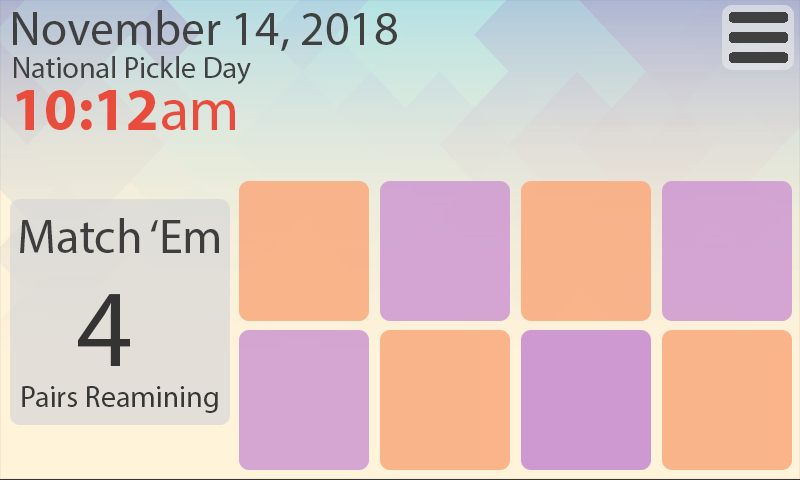
<style>
.page{position:relative;width:800px;height:480px}
.page>*{position:absolute;margin:0}
.t1{font:48px "MyriadPro-Regular";color:#404040}
.t2{font:30px "MyriadPro-Regular";color:#404040}
.t3{font:60px "MyriadPro-Bold";color:#e74c3c}
.t4{font:60px "MyriadPro-Regular";color:#e74c3c}
.t5{font:48px "MyriadPro-Regular";color:#3e3e3e}
.t6{font:110px "MyriadPro-Regular";color:#343434}
.t7{font:30px "MyriadPro-Regular";color:#363636}
</style>
<div class="page">
<p class="t1" style="left:13px;top:10px;width:384px;height:41px">November 14, 2018</p>
<p class="t2" style="left:14px;top:56px;width:237px;height:29px">National Pickle Day</p>
<p class="t3" style="left:16px;top:90px;width:219px;height:40px">10:12<span class="t4">am</span></p>
<p class="t5" style="left:20px;top:218px;width:199px;height:35px">Match ‘Em</p>
<p class="t6" style="left:78px;top:294px;width:52px;height:72px">4</p>
<p class="t7" style="left:22px;top:386px;width:196px;height:27px">Pairs Reamining</p>
</div>
